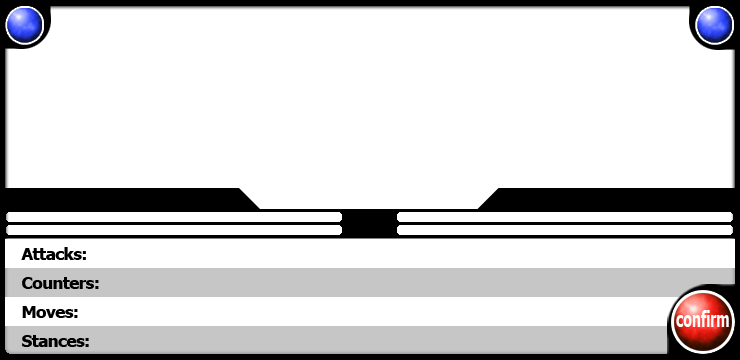
<style>
.page{position:relative;width:740px;height:360px;background:#ffffff}
.page>*{position:absolute;margin:0}
.t1{font:16.7px/29.2px "Tahoma-Bold";letter-spacing:-0.025em;color:#000000}
.t2{font:22.1px "Tahoma-Bold";letter-spacing:-0.01em;color:#ffffff;scale:0.64 1}
</style>
<div class="page">
<p class="t1" style="left:21px;top:247px;width:78px;height:100px">Attacks:   <br>Counters: <br>Moves:    <br>Stances:</p>
<p class="t2" style="left:676px;top:310px;width:53px;height:17px">confirm</p>
</div>
